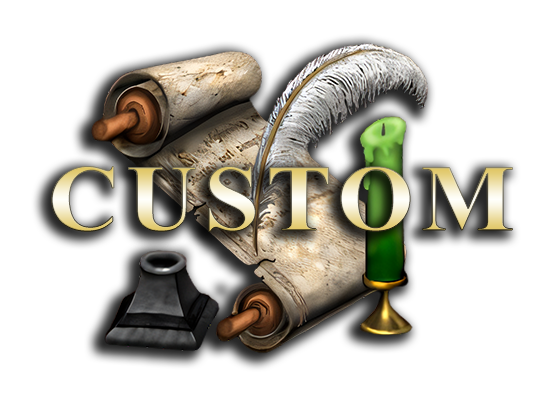
<style>
.page{position:relative;width:560px;height:416px;background:#ffffff}
.page>*{position:absolute;margin:0}
.t1{font:94px "TimesNewRomanPS-BoldMT";letter-spacing:0.07em;scale:1.05 1}
</style>
<div class="page">
<p class="t1" style="left:51px;top:166px;width:462px;height:66px">CUSTOM</p>
</div>
